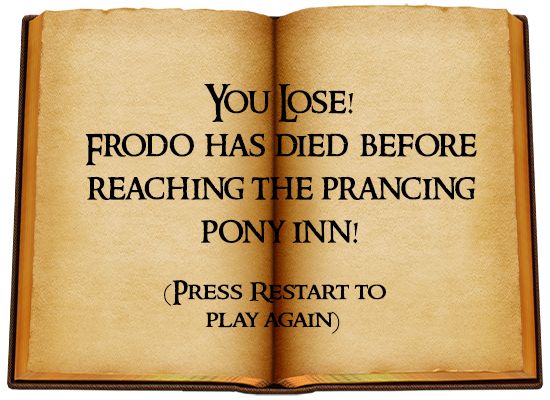
<style>
.page{position:relative;width:550px;height:400px}
.page>*{position:absolute;margin:0}
.t1{font:36px "RingbearerMedium";color:#000000}
.t2{font:23.2px "RingbearerMedium";color:#000000;scale:1.16 1}
</style>
<div class="page">
<p class="t1" style="left:85px;top:83px;width:392px;height:161px;text-align:center">You Lose!<br>Frodo has died before<br>reaching the prancing<br>pony inn!</p>
<p class="t2" style="left:164px;top:280px;width:222px;height:54px;text-align:center">(Press Restart to<br>play again)</p>
</div>
